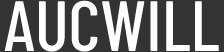
<style>
.page{position:relative;width:224px;height:52px;background:#333333}
.page>*{position:absolute;margin:0}
.t1{font:71px "BarlowCondensed-Medium";color:#ffffff}
</style>
<div class="page">
<p class="t1" style="left:4px;top:0px;width:215px;height:52px">AUCWILL</p>
</div>
